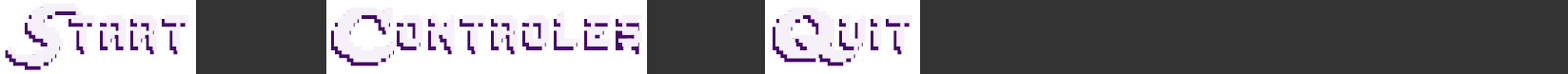
<style>
.page{position:relative;width:1568px;height:74px;background:#333333}
.page>*{position:absolute;margin:0}
.t1{font:62.8px "Lady-Radical";letter-spacing:0.06em}
</style>
<div class="page">
<p class="t1" style="left:5px;top:7px;width:181px;height:63px">Start</p>
<p class="t1" style="left:331px;top:10px;width:308px;height:57px">Controler</p>
<p class="t1" style="left:773px;top:10px;width:137px;height:57px">Quit</p>
</div>
